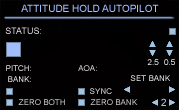
<style>
.page{position:relative;width:179px;height:110px;background:#020000}
.page>*{position:absolute;margin:0}
.t1{font:10px "ArialMT";color:#a2beff;font-variant:small-caps}
.t2{font:9px "ArialMT";font-variant:small-caps}
.t3{font:8px "ArialMT";font-variant:small-caps}
.t4{font:8px "ArialMT";color:#f1f1f1;font-variant:small-caps}
.t5{font:8px "ArialMT";color:#e9e9e9;font-variant:small-caps}
.t6{font:10px "ArialMT";color:#9fc3e3;font-variant:small-caps}
</style>
<div class="page">
<p class="t1" style="left:21px;top:4px;width:138px;height:8px">ATTITUDE HOLD AUTOPILOT</p>
<p class="t2" style="left:5px;top:27px;width:36px;height:7px">STATUS:</p>
<p class="t3" style="left:6px;top:65px;width:25px;height:6px">PITCH:</p>
<p class="t3" style="left:78px;top:65px;width:19px;height:6px">AOA:</p>
<p class="t4" style="left:147px;top:59px;width:12px;height:6px">2.5</p>
<p class="t3" style="left:164px;top:59px;width:11px;height:6px">0.5</p>
<p class="t5" style="left:8px;top:76px;width:23px;height:6px">BANK:</p>
<p class="t3" style="left:130px;top:75px;width:41px;height:6px">SET BANK</p>
<p class="t3" style="left:90px;top:88px;width:22px;height:6px">SYNC</p>
<p class="t6" style="left:161px;top:98px;width:5px;height:8px">2</p>
</div>
